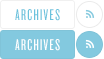
<style>
.page{position:relative;width:104px;height:59px;background:#ffffff}
.page>*{position:absolute;margin:0}
.t1{font:16px "Knockout-27JuniorBantamwt";letter-spacing:0.08em;color:#6bc2dd;text-transform:uppercase}
.t2{font:16px "Knockout-27JuniorBantamwt";letter-spacing:0.08em;color:#ffffff;text-transform:uppercase}
</style>
<div class="page">
<p class="t1" style="left:15px;top:9px;width:45px;height:12px">ARCHIVES</p>
<p class="t2" style="left:15px;top:39px;width:45px;height:12px">ARCHIVES</p>
</div>
